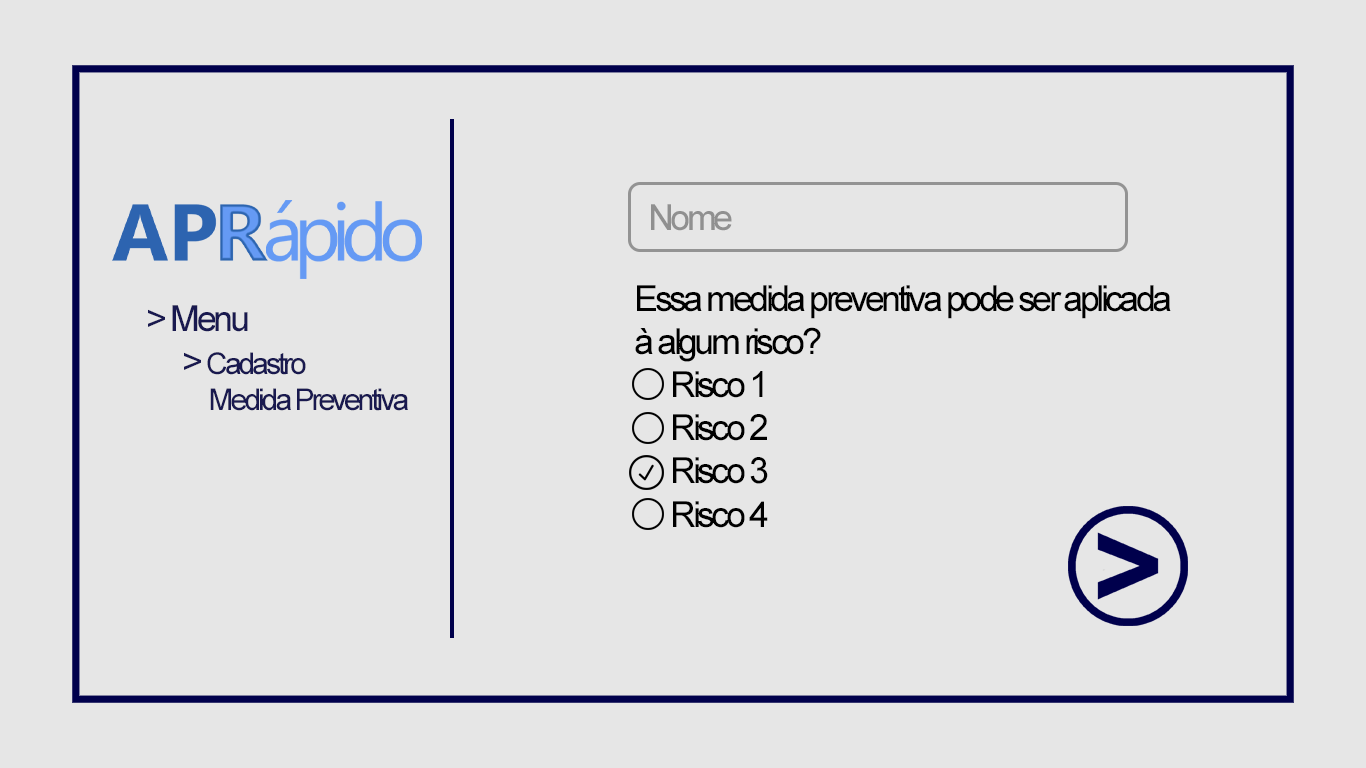
<style>
.page{position:relative;width:1366px;height:768px;background:#e6e6e6}
.page>*{position:absolute;margin:0}
.t1{font:36px "ArialMT";letter-spacing:-0.1em;color:#909090}
.t2{font:36px "ArialMT";letter-spacing:-0.1em;color:#000000}
.t3{font:30px "ArialMT";letter-spacing:-0.1em;color:#19194f}
.t4{font:36px "ArialMT";letter-spacing:-0.095em;color:#19194f}
</style>
<div class="page">
<p class="t1" style="left:651px;top:204px;width:81px;height:27px">Nome</p>
<p class="t2" style="left:635px;top:285px;width:536px;height:243px">Essa medida preventiva pode ser aplicada <br>à algum risco?<br> Risco 1<br> Risco 2<br> Risco 3<br> Risco 4</p>
<p class="t3" style="left:148px;top:305px;width:260px;height:106px"><span class="t4">&gt; Menu<br> &gt; </span>Cadastro <br>      Medida Preventiva</p>
</div>
